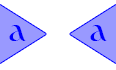
<style>
.page{position:relative;width:116px;height:70px;background:#ffffff}
.page>*{position:absolute;margin:0}
.t1{font:36px "Catull-Regular";letter-spacing:0.62em;color:#0000ff}
</style>
<div class="page">
<p class="t1" style="left:9px;top:25px;width:17px;height:16px">a</p>
<p class="t1" style="left:90px;top:25px;width:17px;height:16px">a</p>
</div>
